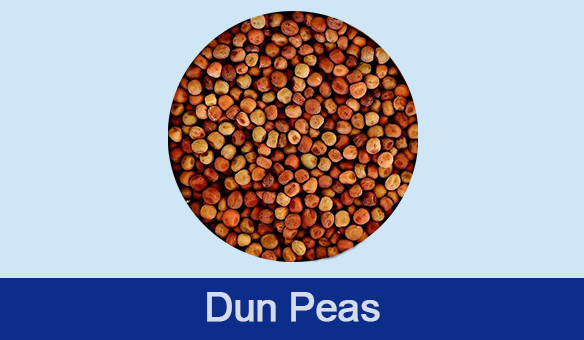
<style>
.page{position:relative;width:584px;height:340px;background:#cee6f6}
.page>*{position:absolute;margin:0}
.t1{font:40.2px "ArialMT";letter-spacing:-0.03em;color:#d4dbed;font-weight:bold}
</style>
<div class="page">
<p class="t1" style="left:207px;top:292px;width:173px;height:30px">Dun Peas</p>
</div>
